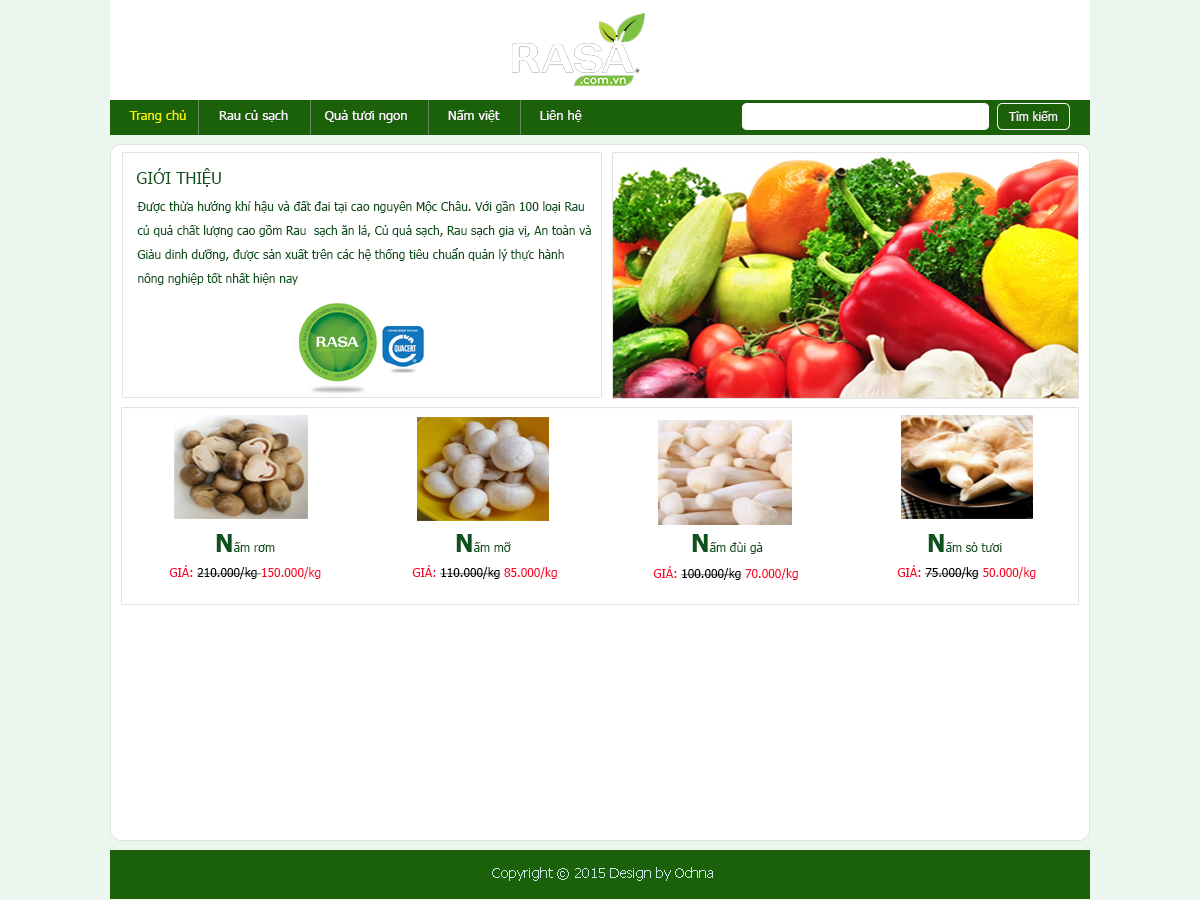
<style>
.page{position:relative;width:1200px;height:900px;background:#ffffff}
.page>*{position:absolute;margin:0}
.t1{font:13px "Tahoma";color:#faf4fa}
.t2{font:13px "Tahoma";color:#f1f40a}
.t3{font:12px "Tahoma";color:#faf4fa}
.t4{font:16px "Tahoma";color:#0d521c}
.t5{font:12px/24px "Tahoma";color:#0d521c}
.t6{font:12px "Tahoma";color:#0d521c}
.t7{font:24px "Tahoma-Bold";color:#0d521c}
.t8{font:12px "Tahoma";color:#030303}
.t9{font:12px "Tahoma";color:#f70b2c}
.t10{font:12px "Tahoma";color:#000000}
.t11{font:12px "Tahoma";color:#010101}
.t12{font:14px "Tahoma";color:#c7e8e8}
</style>
<div class="page">
<p class="t1" style="left:129px;top:110px;width:453px;height:13px"><span class="t2">Trang chủ</span>        Rau củ sạch         Quả tươi ngon          Nấm việt          Liên hệ</p>
<p class="t3" style="left:1008px;top:111px;width:50px;height:10px">Tìm kiếm</p>
<p class="t4" style="left:136px;top:168px;width:85px;height:19px">GIỚI THIỆU</p>
<p class="t5" style="left:137px;top:201px;width:454px;height:84px">Được thừa hưởng khí hậu và đất đai tại cao nguyên Mộc Châu. Với gần 100 loại Rau<br>củ quả chất lượng cao gồm Rau  sạch ăn lá, Củ quả sạch, Rau sạch gia vị, An toàn và <br>Giàu dinh dưỡng, được sản xuất trên các hệ thống tiêu chuẩn quản lý thực hành <br>nông nghiệp tốt nhất hiện nay</p>
<p class="t6" style="left:216px;top:534px;width:59px;height:18px"><span class="t7">N</span>ấm rơm</p>
<p class="t6" style="left:456px;top:534px;width:55px;height:18px"><span class="t7">N</span>ấm mỡ</p>
<p class="t6" style="left:692px;top:534px;width:71px;height:20px"><span class="t7">N</span>ấm đùi gà</p>
<p class="t6" style="left:928px;top:534px;width:74px;height:18px"><span class="t7">N</span>ấm sò tươi</p>
<p class="t8" style="left:169px;top:565px;width:152px;height:14px"><span class="t9">GIÁ: </span>210.000/kg <span class="t9">150.000/kg</span></p>
<p class="t10" style="left:412px;top:565px;width:145px;height:14px"><span class="t9">GIÁ: </span>110.000/kg<span class="t9"> 85.000/kg</span></p>
<p class="t11" style="left:653px;top:566px;width:145px;height:14px"><span class="t9">GIÁ: </span>100.000/kg<span class="t9"> 70.000/kg</span></p>
<p class="t10" style="left:897px;top:565px;width:139px;height:14px"><span class="t9">GIÁ: </span>75.000/kg<span class="t9"> 50.000/kg</span></p>
<p class="t12" style="left:492px;top:867px;width:221px;height:14px">Copyright © 2015 Design by Ochna</p>
</div>
